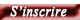
<style>
.page{position:relative;width:80px;height:20px;background:#ffffff}
.page>*{position:absolute;margin:0}
.t1{font:18.2px "Vijaya";color:#ffffff;font-weight:bold;scale:0.9 1}
</style>
<div class="page">
<p class="t1" style="left:10px;top:6px;width:57px;height:11px">S’inscrire</p>
</div>
